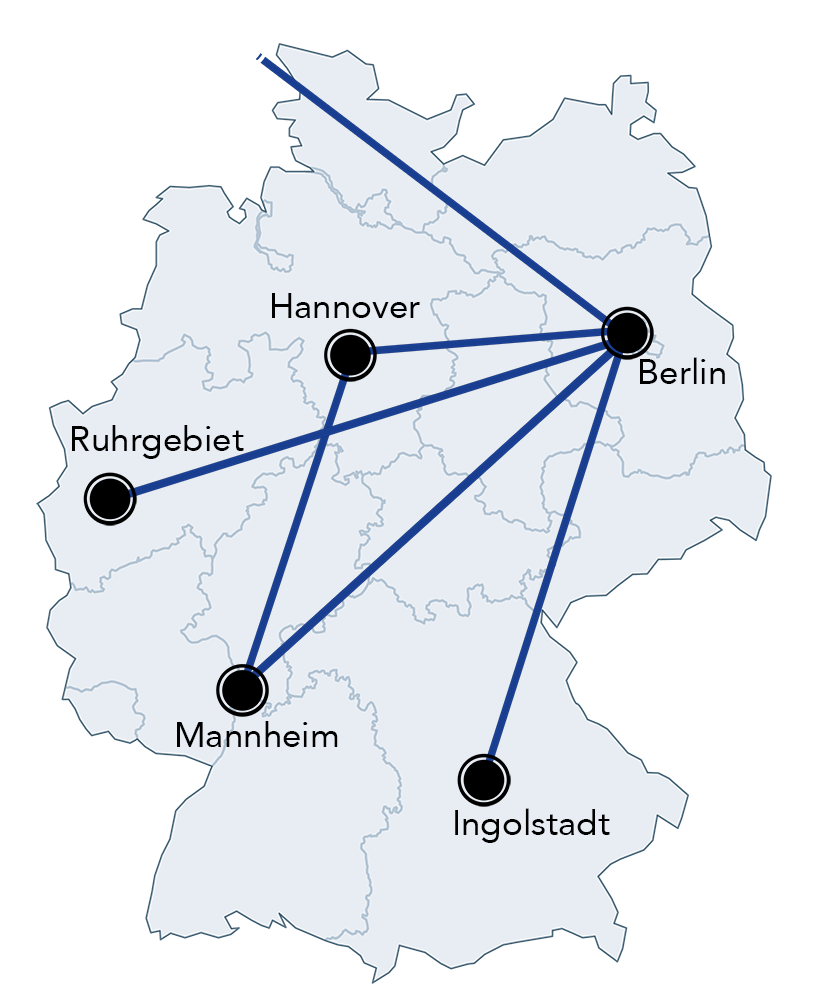
<style>
.page{position:relative;width:813px;height:1000px;background:#e8edf3}
.page>*{position:absolute;margin:0}
.t1{font:35px "Avenir-Roman";color:#000000}
</style>
<div class="page">
<p class="t1" style="left:272px;top:293px;width:148px;height:25px">Hannover</p>
<p class="t1" style="left:640px;top:357px;width:85px;height:27px">Berlin</p>
<p class="t1" style="left:72px;top:425px;width:172px;height:34px">Ruhrgebiet</p>
<p class="t1" style="left:177px;top:721px;width:161px;height:26px">Mannheim</p>
<p class="t1" style="left:455px;top:808px;width:155px;height:35px">Ingolstadt</p>
</div>
